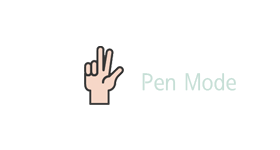
<style>
.page{position:relative;width:280px;height:150px;background:#ffffff}
.page>*{position:absolute;margin:0}
.t1{font:24px "SeN-CM";color:#c6dfd6}
</style>
<div class="page">
<p class="t1" style="left:142px;top:73px;width:94px;height:18px">Pen Mode</p>
</div>
